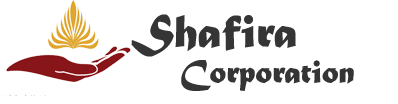
<style>
.page{position:relative;width:398px;height:104px;background:#ffffff}
.page>*{position:absolute;margin:0}
.t1{font:48.7px "MaturaMTScriptCapitals";color:#353535}
.t2{font:34px "MaturaMTScriptCapitals";color:#353535}
</style>
<div class="page">
<p class="t1" style="left:131px;top:14px;width:165px;height:43px">Shafira</p>
<p class="t2" style="left:181px;top:60px;width:173px;height:31px">Corporation</p>
</div>
